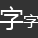
<style>
.page{position:relative;width:38px;height:38px;background:#333333}
.page>*{position:absolute;margin:0}
.t1{font:24px "MicrosoftYaHei";color:#ffffff}
.t2{font:16px "MicrosoftYaHei";color:#ffffff}
</style>
<div class="page">
<p class="t1" style="left:0px;top:6px;width:40px;height:24px">字<span class="t2">字</span></p>
</div>
